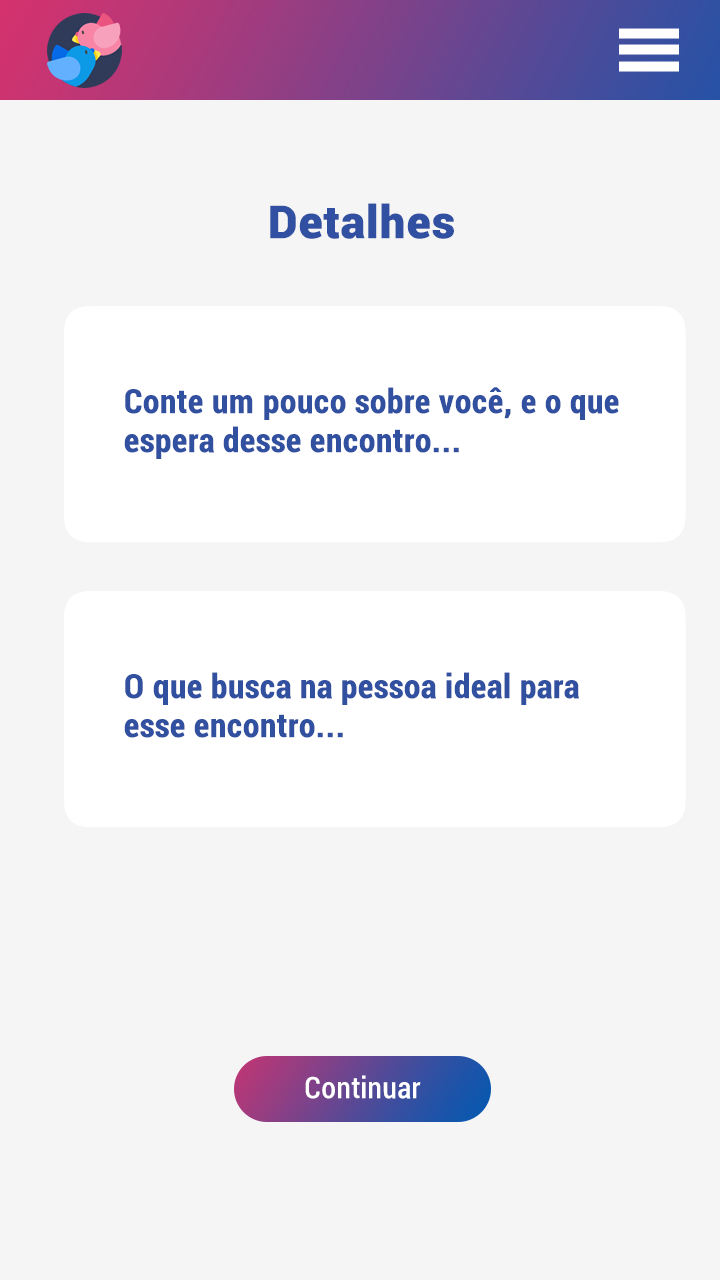
<style>
.page{position:relative;width:720px;height:1280px;background:#f5f5f5}
.page>*{position:absolute;margin:0}
.t1{font:45px "Roboto-Black";color:#3150a1;font-weight:bold}
.t2{font:33px/39.6px "Roboto-BoldCondensed";color:#3150a0;font-weight:bold}
.t3{font:29px "Roboto-Condensed";color:#ffffff;font-weight:bold}
</style>
<div class="page">
<p class="t1" style="left:270px;top:203px;width:184px;height:36px">Detalhes</p>
<p class="t2" style="left:124px;top:387px;width:495px;height:72px">Conte um pouco sobre você, e o que espera desse encontro...</p>
<p class="t2" style="left:124px;top:672px;width:455px;height:66px">O que busca na pessoa ideal para esse encontro...</p>
<p class="t3" style="left:305px;top:1075px;width:116px;height:24px">Continuar</p>
</div>
